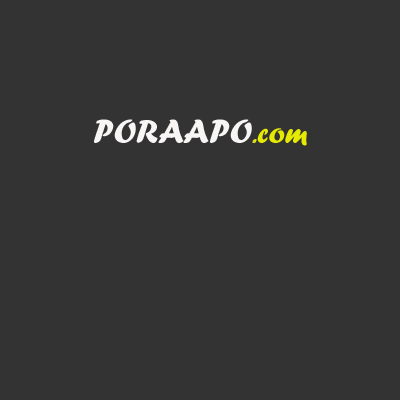
<style>
.page{position:relative;width:400px;height:400px;background:#333333}
.page>*{position:absolute;margin:0}
.t1{font:35px "ForteMT";color:#f8f5f5}
.t2{font:25px "ForteMT";color:#dbe211}
.t3{font:30px "ForteMT";color:#e6e901}
</style>
<div class="page">
<p class="t1" style="left:94px;top:119px;width:213px;height:27px">PORAAPO<span class="t2">.</span><span class="t3">com</span></p>
</div>
